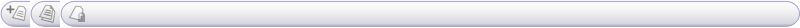
<style>
.page{position:relative;width:800px;height:28px}
.page>*{position:absolute;margin:0}
.t1{font:18px "TrebuchetMS-Bold";color:#7a7a7b}
</style>
<div class="page">
<p class="t1" style="left:6px;top:5px;width:9px;height:9px">+</p>
</div>
